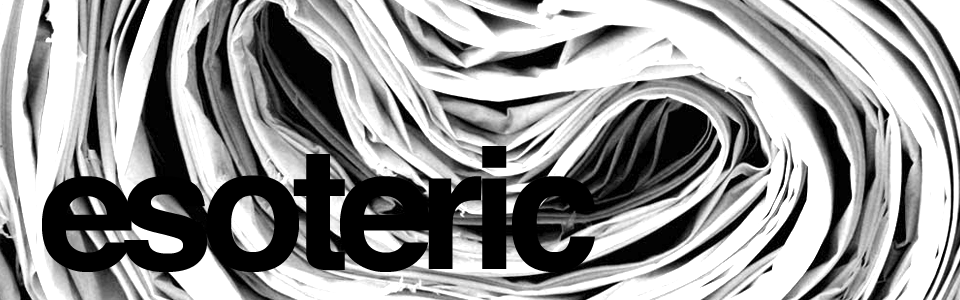
<style>
.page{position:relative;width:960px;height:300px;background:#ffffff}
.page>*{position:absolute;margin:0}
.t1{font:170px "Helvetica-Bold";letter-spacing:-0.075em;color:#000000}
</style>
<div class="page">
<p class="t1" style="left:42px;top:146px;width:554px;height:126px">esoteric</p>
</div>
